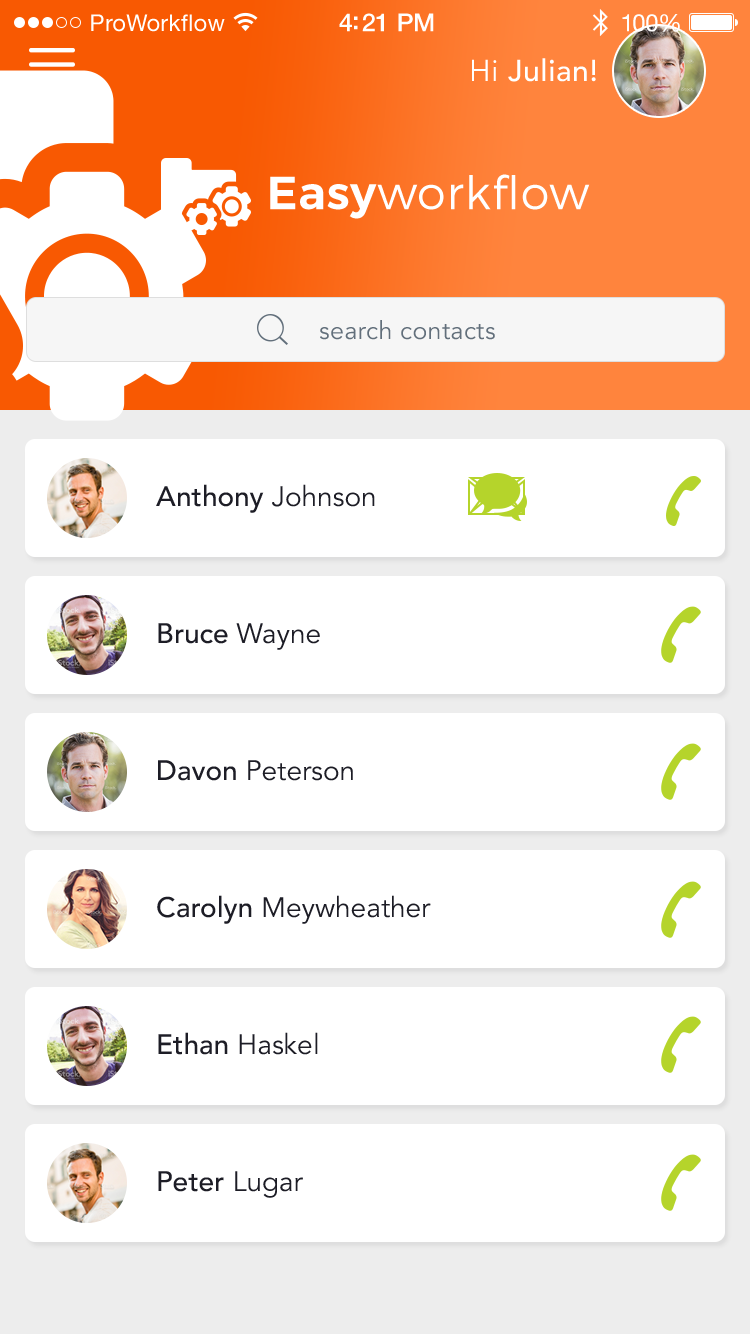
<style>
.page{position:relative;width:750px;height:1334px;background:#ffffff}
.page>*{position:absolute;margin:0}
.t1{font:23px "HelveticaNeue";letter-spacing:0.02em;color:#ffffff}
.t2{font:25px "HelveticaNeue-Medium";letter-spacing:-0.02em;color:#ffffff}
.t3{font:24px "HelveticaNeue";letter-spacing:-0.02em;color:#ffffff}
.t4{font:30px "Avenir-Medium";letter-spacing:0.02em;color:#ffffff}
.t5{font:30px "Avenir-Book";letter-spacing:0.02em;color:#ffffff}
.t6{font:46.3px "Montserrat-Light";letter-spacing:0.02em;color:#ffffff}
.t7{font:46.3px "Montserrat-SemiBold";letter-spacing:0.02em;color:#ffffff}
.t8{font:25px "Avenir-Book";letter-spacing:0.015em;color:#626f7b}
.t9{font:28px "Avenir-Medium";color:#1d1d26}
.t10{font:28px "Avenir-Book";color:#1d1d26}
</style>
<div class="page">
<p class="t1" style="left:91px;top:14px;width:134px;height:18px">ProWorkflow</p>
<p class="t2" style="left:339px;top:13px;width:95px;height:19px">4:21 PM</p>
<p class="t3" style="left:622px;top:14px;width:58px;height:18px">100%</p>
<p class="t4" style="left:472px;top:58px;width:124px;height:24px"><span class="t5">Hi </span>Julian!</p>
<p class="t6" style="left:270px;top:174px;width:320px;height:45px"><span class="t7">Easy</span>workflow</p>
<p class="t8" style="left:320px;top:320px;width:175px;height:20px">search contacts</p>
<p class="t9" style="left:156px;top:484px;width:219px;height:29px">Anthony <span class="t10">Johnson</span></p>
<p class="t9" style="left:158px;top:623px;width:162px;height:27px">Bruce <span class="t10">Wayne</span></p>
<p class="t10" style="left:158px;top:760px;width:195px;height:21px"><span class="t9">Davon </span>Peterson</p>
<p class="t10" style="left:157px;top:895px;width:274px;height:29px"><span class="t9">Carolyn </span>Meywheather</p>
<p class="t10" style="left:158px;top:1032px;width:160px;height:23px"><span class="t9">Ethan </span>Haskel</p>
<p class="t9" style="left:158px;top:1171px;width:145px;height:27px">Peter <span class="t10">Lugar</span></p>
</div>
